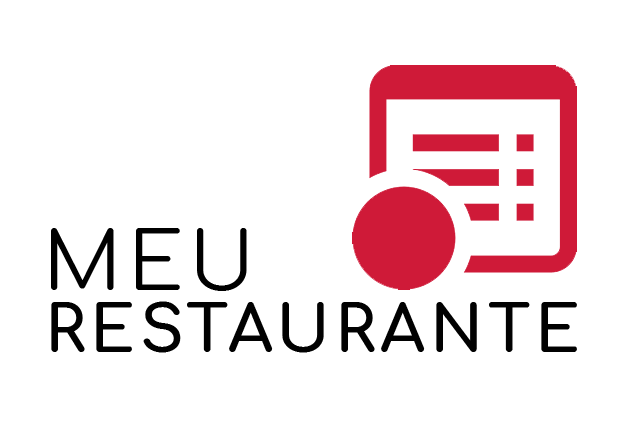
<style>
.page{position:relative;width:626px;height:426px;background:#ffffff}
.page>*{position:absolute;margin:0}
.t1{font:80px "Comfortaa-Regular";letter-spacing:0.075em;color:#000000}
.t2{font:64px "Comfortaa-Bold";letter-spacing:0.075em;color:#010101}
</style>
<div class="page">
<p class="t1" style="left:51px;top:228px;width:196px;height:63px">MEU</p>
<p class="t2" style="left:51px;top:301px;width:526px;height:52px">RESTAURANTE</p>
</div>
